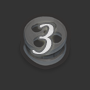
<style>
.page{position:relative;width:90px;height:90px;background:#333333}
.page>*{position:absolute;margin:0}
.t1{font:48px "Agnes";letter-spacing:-0.06em;color:#e0e0e0;font-weight:bold}
</style>
<div class="page">
<p class="t1" style="left:32px;top:12px;width:23px;height:51px">3</p>
</div>
